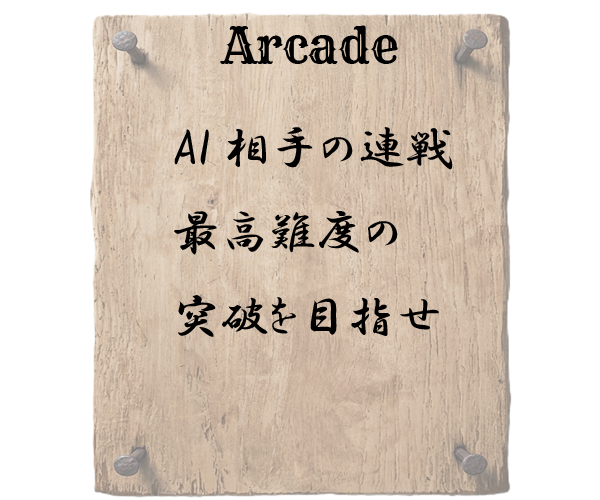
<style>
.page{position:relative;width:600px;height:500px;background:#ffffff}
.page>*{position:absolute;margin:0}
.t1{font:48px "Rye-Regular";color:#000000}
.t2{font:48px "HGPGyoshotai";color:#000000}
</style>
<div class="page">
<p class="t1" style="left:220px;top:25px;width:178px;height:39px">Arcade</p>
<p class="t2" style="left:174px;top:127px;width:279px;height:210px">AI相手の連戦<br>最高難度の<br>突破を目指せ</p>
</div>
